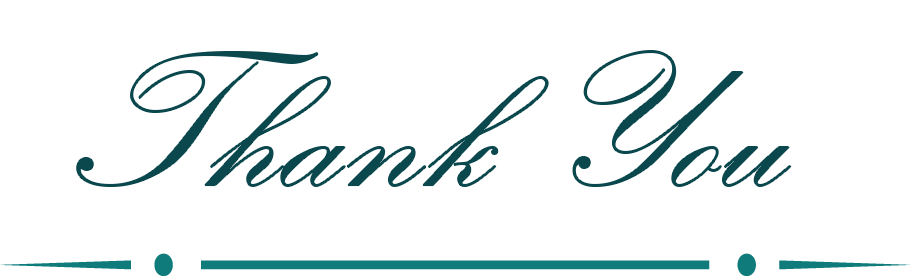
<style>
.page{position:relative;width:910px;height:276px;background:#ffffff}
.page>*{position:absolute;margin:0}
.t1{font:200px "KunstlerScript";letter-spacing:0.02em;color:#0b484e}
</style>
<div class="page">
<p class="t1" style="left:77px;top:51px;width:714px;height:135px">Thank You</p>
</div>
